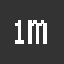
<style>
.page{position:relative;width:64px;height:64px;background:#333333}
.page>*{position:absolute;margin:0}
.t1{font:40.9px "Glasstown-NBP";letter-spacing:0.005em;color:#ffffff;font-weight:bold}
</style>
<div class="page">
<p class="t1" style="left:15px;top:20px;width:32px;height:24px">1M</p>
</div>
